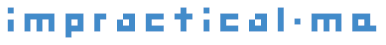
<style>
.page{position:relative;width:386px;height:45px;background:#ffffff}
.page>*{position:absolute;margin:0}
.t1{font:48px "Hooge0455";letter-spacing:0.1em;color:#428bca}
</style>
<div class="page">
<p class="t1" style="left:7px;top:7px;width:370px;height:31px">impractical.me</p>
</div>
